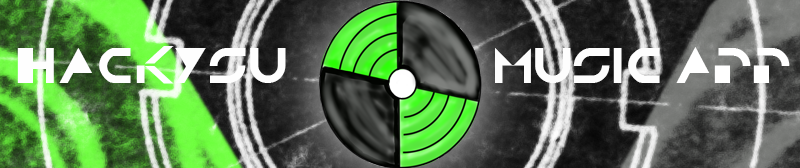
<style>
.page{position:relative;width:800px;height:168px}
.page>*{position:absolute;margin:0}
.t1{font:36px "TRON";color:#fefefe}
.t2{font:36px "TRON";color:#fdfdfd}
.t3{font:36.3px "TRON";color:#ffffff}
</style>
<div class="page">
<p class="t1" style="left:17px;top:46px;width:269px;height:38px">HackYSU</p>
<p class="t2" style="left:495px;top:48px;width:165px;height:35px">Music</p>
<p class="t3" style="left:676px;top:47px;width:114px;height:36px">App</p>
</div>
